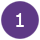
<style>
.page{position:relative;width:40px;height:40px;background:#5f3986}
.page>*{position:absolute;margin:0}
.t1{font:18.8px "Verdana";color:#fffefe}
</style>
<div class="page">
<p class="t1" style="left:16px;top:13px;width:8px;height:14px">1</p>
</div>
